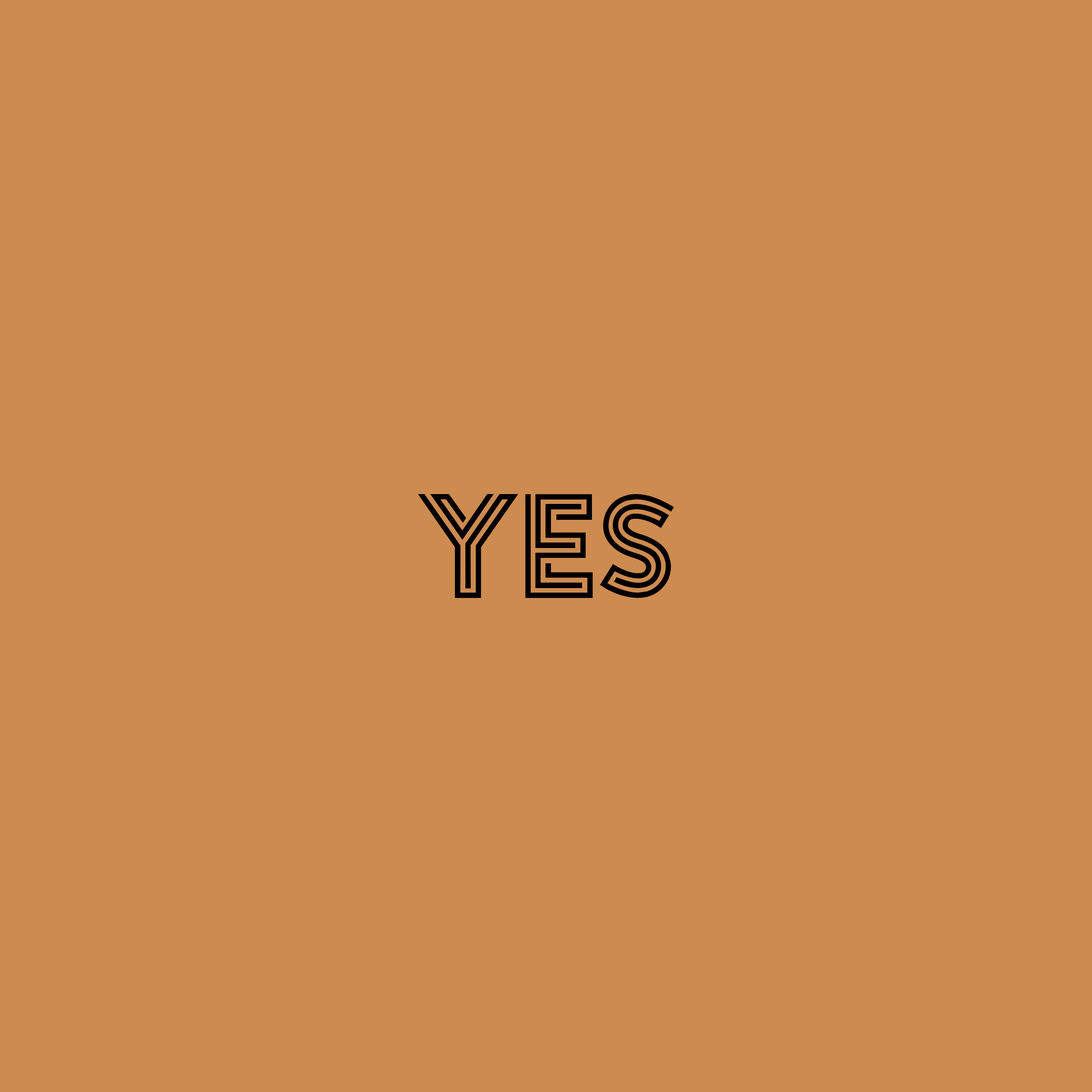
<style>
.page{position:relative;width:1092px;height:1092px;background:#ce8b4f}
.page>*{position:absolute;margin:0}
.t1{font:148.4px "ArgonPERSONAL-Regular";color:#000000}
</style>
<div class="page">
<p class="t1" style="left:418px;top:494px;width:256px;height:104px">YES</p>
</div>
